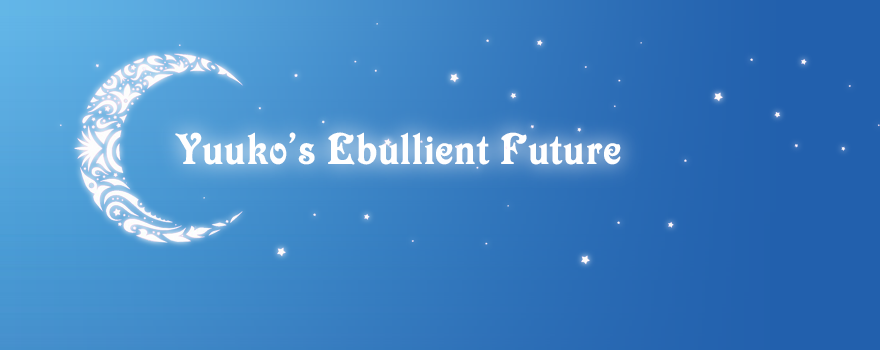
<style>
.page{position:relative;width:880px;height:350px}
.page>*{position:absolute;margin:0}
.t1{font:47.1px "VictorianLetPlain";letter-spacing:0.02em;color:#ffffff}
</style>
<div class="page">
<p class="t1" style="left:175px;top:132px;width:446px;height:33px">Yuuko’s Ebullient Future</p>
</div>
